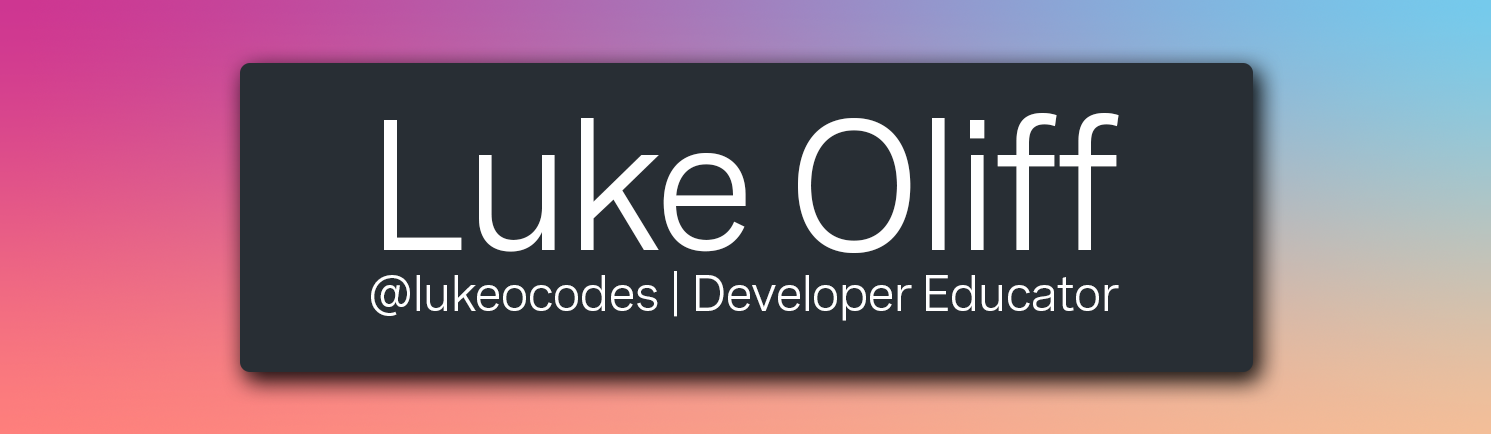
<style>
.page{position:relative;width:1491px;height:434px;background:#282e34}
.page>*{position:absolute;margin:0}
.t1{font:50.4px "Spezia-Regular";letter-spacing:-0.04em;color:#ffffff}
.t2{font:185.8px "Spezia-Regular";letter-spacing:-0.04em;color:#ffffff}
</style>
<div class="page">
<p class="t1" style="left:371px;top:113px;width:748px;height:208px;text-align:center"><span class="t2">Luke Oliff<br></span>@lukeocodes | Developer Educator</p>
</div>
